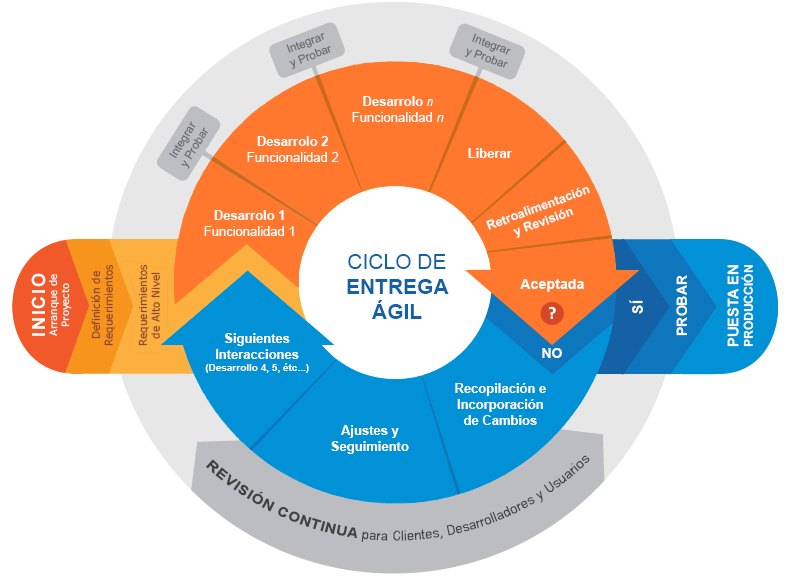
<style>
.page{position:relative;width:800px;height:578px;background:#ffffff}
.page>*{position:absolute;margin:0}
.t1{font:11.5px "ArialMT";color:#67676a}
.t2{font:13px "ArialMT";color:#ffffff}
.t3{font:13px "Arial-BoldMT";color:#ffffff}
.t4{font:13px "ArialNarrow-Italic";color:#ffffff}
.t5{font:13px "Arial-ItalicMT";color:#ffffff}
.t6{font:12.5px "Arial-BoldMT";color:#ffffff}
.t7{font:21px "Arial-BoldMT";color:#1462a5}
.t8{font:21px "ArialMT";color:#1462a5}
.t9{font:10.5px "MSReferenceSansSerif";color:#8c452e}
.t10{font:12.1px "Arial-BoldMT";color:#ffffff}
.t11{font:14.7px "Arial-BoldMT";color:#ffffff}
.t12{font:10px "MSReferenceSansSerif";color:#ffffff}
.t13{font:18px "Arial-BoldMT";color:#ffffff}
.t14{font:14.3px "Arial-BoldMT";color:#ffffff}
.t15{font:13.8px "Arial-BoldMT";color:#ffffff}
.t16{font:14px "Arial-BoldMT";color:#ffffff}
.t17{font:10px "Arial-BoldMT";color:#ffffff}
.t18{font:14px "ArialNarrow";color:#404041}
.t19{font:14px "Arial-BoldMT";color:#404041}
</style>
<div class="page">
<p class="t1" style="left:286px;top:33px;width:45px;height:36px;text-align:center;rotate:-21deg">Integrar<br>y Probar</p>
<p class="t1" style="left:464px;top:33px;width:47px;height:35px;text-align:center;rotate:20deg">Integrar<br>y Probar</p>
<p class="t2" style="left:352px;top:96px;width:92px;height:26px;text-align:center"><span class="t3">Desarrolo </span><span class="t4">n<br></span>Funcionalidad <span class="t5">n</span></p>
<p class="t1" style="left:169px;top:121px;width:39px;height:48px;text-align:center;rotate:-58deg">Integrar<br>y Probar</p>
<p class="t2" style="left:247px;top:136px;width:92px;height:26px;text-align:center"><span class="t3">Desarrolo 2<br></span>Funcionalidad 2</p>
<p class="t3" style="left:468px;top:148px;width:44px;height:10px">Liberar</p>
<p class="t6" style="left:486px;top:186px;width:104px;height:53px;text-align:center;rotate:-20deg">Retroalimentación<br>y Revisión</p>
<p class="t2" style="left:204px;top:210px;width:90px;height:26px;text-align:center"><span class="t3">Desarrolo 1<br></span>Funcionalidad 1</p>
<p class="t7" style="left:347px;top:254px;width:102px;height:65px;text-align:center"><span class="t8">CICLO DE<br></span>ENTREGA<br>ÁGIL</p>
<p class="t9" style="left:90px;top:264px;width:25px;height:82px;text-align:center;rotate:-90deg">Definición de<br>Requerimientos</p>
<p class="t9" style="left:138px;top:264px;width:22px;height:82px;text-align:center;rotate:-90deg">Requerimientos<br>de Alto Nivel</p>
<p class="t10" style="left:727px;top:265px;width:27px;height:82px;rotate:-90deg"><span class="t11">PUESTA EN<br></span>PRODUCCIÓN</p>
<p class="t12" style="left:31px;top:273px;width:41px;height:63px;text-align:justify;rotate:-90deg"><span class="t13">INICIO<br></span>Arranque de<br>Proyecto</p>
<p class="t14" style="left:520px;top:279px;width:64px;height:13px">Aceptada</p>
<p class="t15" style="left:676px;top:275px;width:12px;height:61px;rotate:-90deg">PROBAR</p>
<p class="t16" style="left:629px;top:300px;width:14px;height:14px;rotate:-90deg">SÍ</p>
<p class="t17" style="left:205px;top:333px;width:104px;height:40px;text-align:center"><span class="t3">Siguientes<br>Interacciones<br></span>(Desarrollo 4, 5, étc...)</p>
<p class="t16" style="left:542px;top:348px;width:20px;height:10px">NO</p>
<p class="t3" style="left:455px;top:383px;width:91px;height:42px;text-align:center">Recopilación e<br>Incorporación<br>de Cambios</p>
<p class="t3" style="left:331px;top:425px;width:78px;height:29px;text-align:center">Ajustes y<br>Seguimiento</p>
<p class="t18" style="left:206px;top:455px;width:384px;height:87px;rotate:-1deg"><span class="t19">REVISIÓN CONTINUA</span> para Clientes, Desarrolladores y Usuarios</p>
</div>
